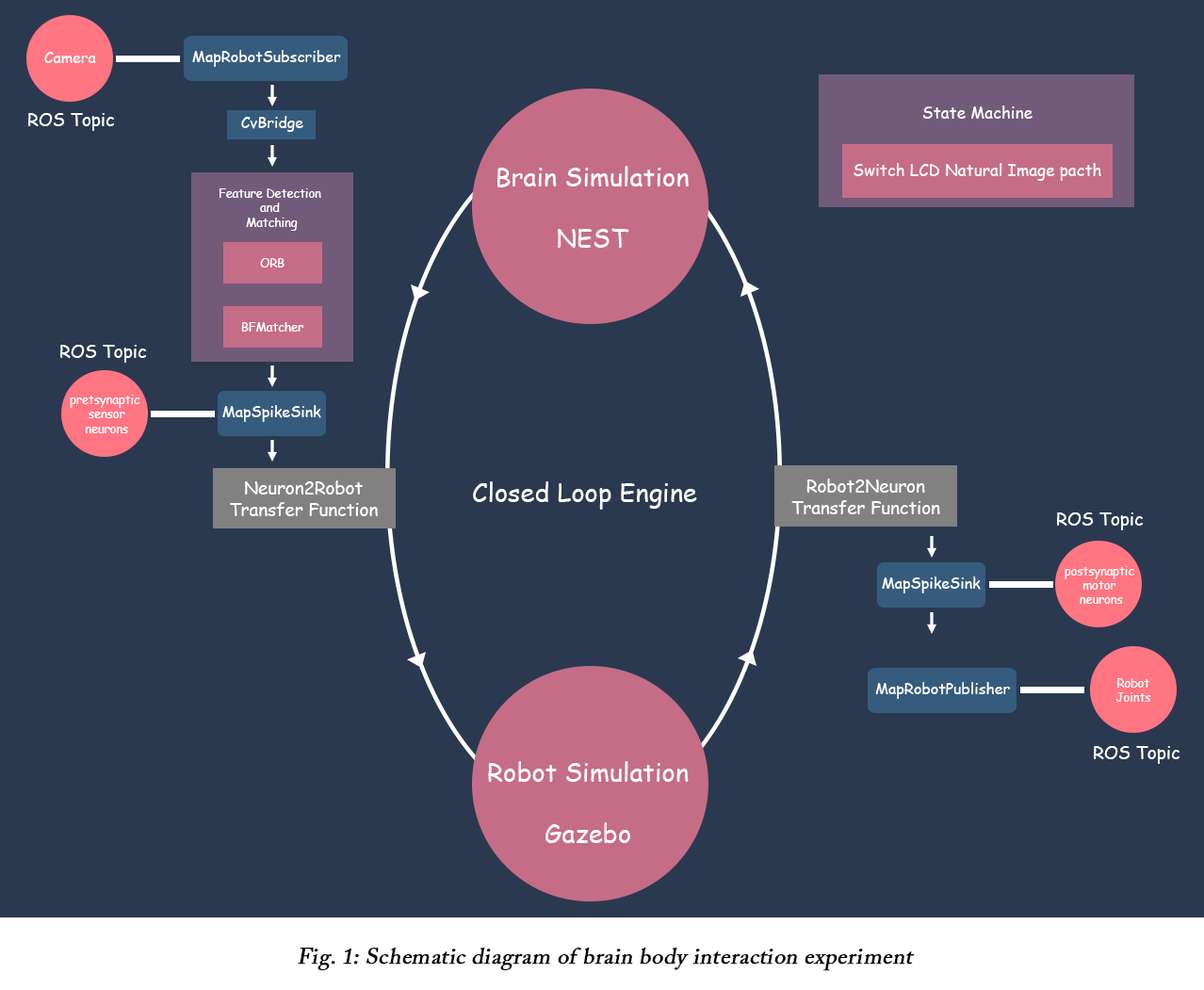
<style>
.page{position:relative;width:1204px;height:990px;background:#2a3950}
.page>*{position:absolute;margin:0}
.t1{font:15.1px "ComicSansMS";color:#ffffff}
.t2{font:17.6px "ComicSansMS";color:#ffffff}
.t3{font:16px "ComicSansMS";color:#ffffff}
.t4{font:25.7px "ComicSansMS";color:#ffffff}
.t5{font:11.9px "ComicSansMS";color:#ffffff}
.t6{font:25.3px "ComicSansMS";color:#ffffff}
.t7{font:22.6px "ACaslonPro-Regular";color:#000000;font-weight:bold;font-style:italic}
</style>
<div class="page">
<p class="t1" style="left:44px;top:52px;width:52px;height:11px">Camera</p>
<p class="t1" style="left:192px;top:50px;width:149px;height:17px">MapRobotSubscriber</p>
<p class="t2" style="left:28px;top:113px;width:86px;height:18px">ROS Topic</p>
<p class="t3" style="left:922px;top:106px;width:111px;height:13px">State Machine</p>
<p class="t1" style="left:241px;top:116px;width:62px;height:16px">CvBridge</p>
<p class="t4" style="left:497px;top:166px;width:192px;height:82px;text-align:center">Brain Simulation<br><br>NEST</p>
<p class="t3" style="left:854px;top:163px;width:247px;height:18px">Switch LCD Natural Image pacth</p>
<p class="t5" style="left:220px;top:188px;width:101px;height:43px;text-align:center">Feature Detection <br>and <br>Matching</p>
<p class="t5" style="left:260px;top:258px;width:25px;height:10px">ORB</p>
<p class="t5" style="left:241px;top:322px;width:62px;height:10px">BFMatcher</p>
<p class="t2" style="left:60px;top:345px;width:86px;height:18px">ROS Topic</p>
<p class="t5" style="left:70px;top:395px;width:70px;height:38px;text-align:center">pretsynaptic <br>sensor<br>neurons</p>
<p class="t1" style="left:222px;top:405px;width:99px;height:17px">MapSpikeSink</p>
<p class="t2" style="left:230px;top:481px;width:148px;height:35px;text-align:center">Neuron2Robot<br>Transfer Function</p>
<p class="t6" style="left:473px;top:481px;width:224px;height:29px">Closed Loop Engine</p>
<p class="t2" style="left:791px;top:479px;width:149px;height:35px;text-align:center">Robot2Neuron<br>Transfer Function</p>
<p class="t2" style="left:1057px;top:513px;width:86px;height:17px">ROS Topic</p>
<p class="t5" style="left:1065px;top:566px;width:69px;height:38px;text-align:center">postsynaptic <br>motor <br>neurons</p>
<p class="t1" style="left:882px;top:577px;width:99px;height:17px">MapSpikeSink</p>
<p class="t1" style="left:875px;top:682px;width:135px;height:17px">MapRobotPublisher</p>
<p class="t5" style="left:1116px;top:678px;width:35px;height:24px;text-align:center">Robot<br>Joints</p>
<p class="t2" style="left:1094px;top:746px;width:86px;height:18px">ROS Topic</p>
<p class="t4" style="left:488px;top:761px;width:201px;height:82px;text-align:center">Robot Simulation<br><br>Gazebo</p>
<p class="t7" style="left:298px;top:948px;width:617px;height:23px">Fig. 1: Schematic diagram of brain body interaction experiment</p>
</div>
